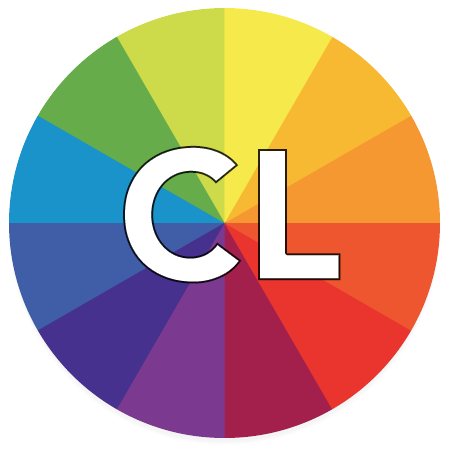
<style>
.page{position:relative;width:450px;height:450px;background:#ffffff}
.page>*{position:absolute;margin:0}
.t1{font:185px "Avenir-Black";color:#ffffff}
</style>
<div class="page">
<p class="t1" style="left:123px;top:145px;width:218px;height:139px">CL</p>
</div>
